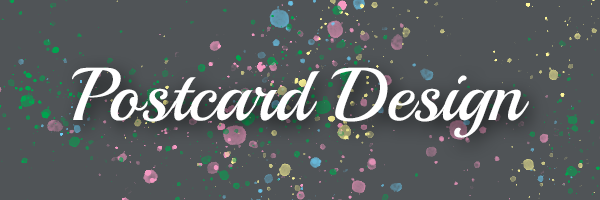
<style>
.page{position:relative;width:600px;height:200px;background:#505457}
.page>*{position:absolute;margin:0}
.t1{font:74.7px "Playball-Regular";color:#ffffff}
</style>
<div class="page">
<p class="t1" style="left:72px;top:67px;width:457px;height:71px">Postcard Design</p>
</div>
